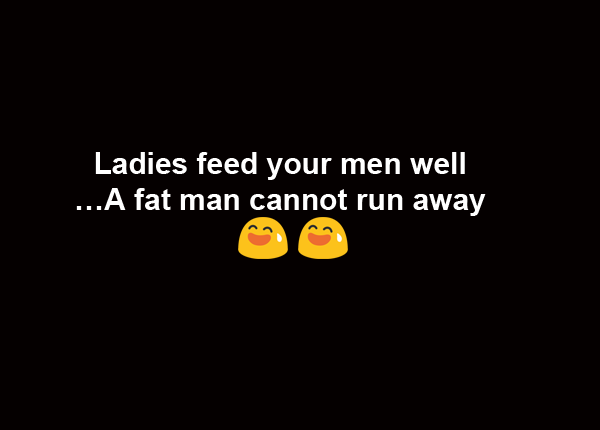
<style>
.page{position:relative;width:600px;height:430px;background:#050000}
.page>*{position:absolute;margin:0}
.t1{font:30px "Arial-BoldMT";color:#ffffff}
</style>
<div class="page">
<p class="t1" style="left:76px;top:152px;width:410px;height:64px;text-align:center">Ladies feed your men well<br>…A fat man cannot run away</p>
</div>
